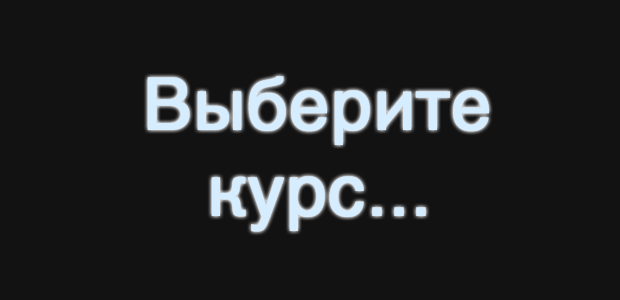
<style>
.page{position:relative;width:620px;height:300px;background:#121212}
.page>*{position:absolute;margin:0}
.t1{font:72px "HelveticaWorld-Regular";color:#d5edff;font-weight:bold}
</style>
<div class="page">
<p class="t1" style="left:147px;top:76px;width:342px;height:156px;text-align:center">Выберите<br>курс...</p>
</div>
